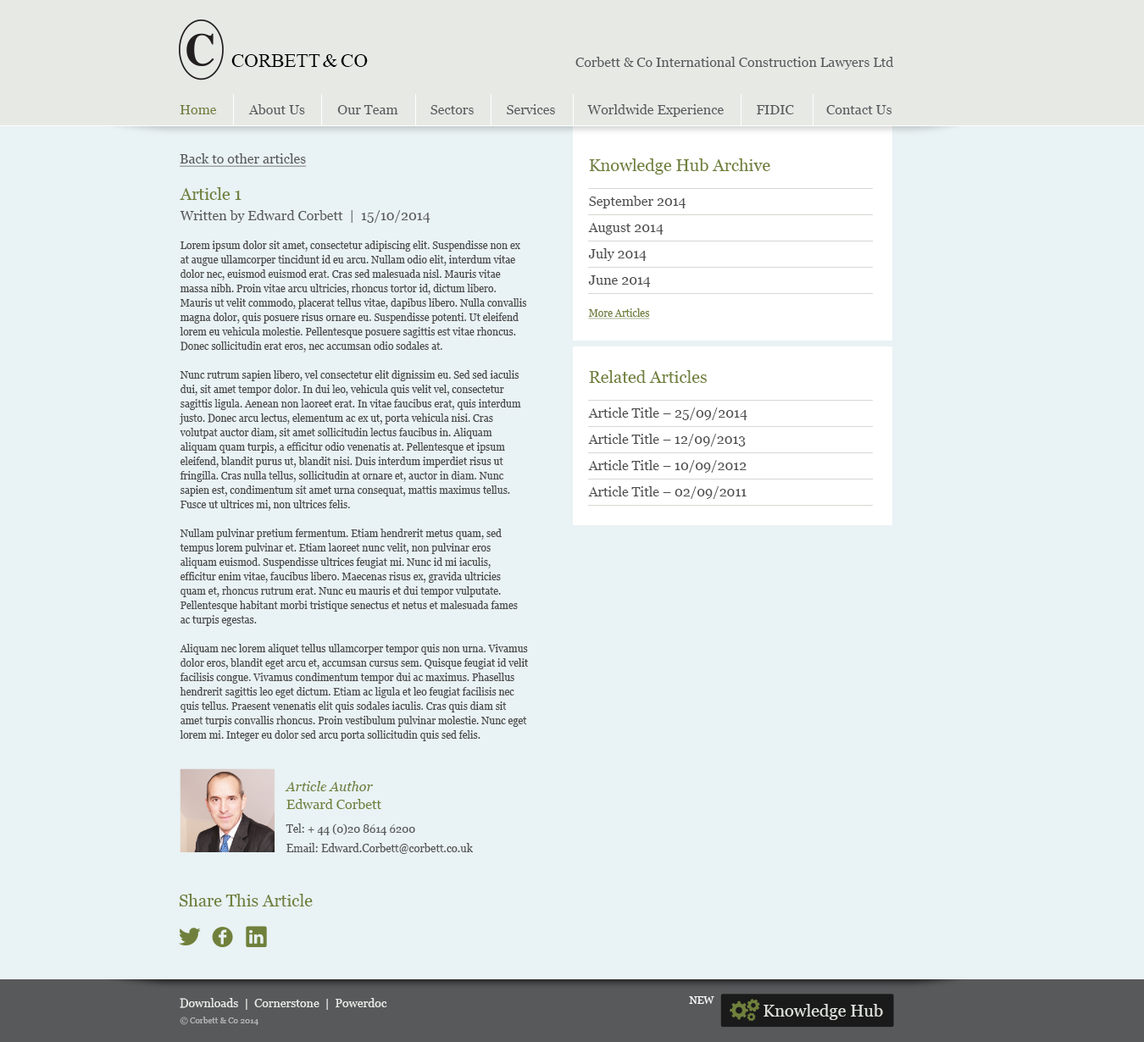
<style>
.page{position:relative;width:1144px;height:1042px;background:#e9f2f4}
.page>*{position:absolute;margin:0}
.t1{font:19.5px "TimesNewRomanPSMT";color:#000000}
.t2{font:13.6px "Georgia";color:#58595b}
.t3{font:13.6px "Georgia";color:#70803c}
.t4{font:13.6px "Georgia";color:#58595b;text-decoration:underline}
.t5{font:13.6px/26.3px "Georgia";color:#4d4d4d}
.t6{font:16.9px "Georgia";color:#70803c}
.t7{font:10.2px/14.4px "Georgia";color:#70803c;text-decoration:underline}
.t8{font:10.2px/14.4px "Georgia";color:#4d4d4d}
.t9{font:13.6px "Georgia-Italic";color:#70803c}
.t10{font:11px/19.5px "Georgia";color:#58595b}
.t11{font:11.9px "Georgia";color:#e7e9e5}
.t12{font:10.2px "Georgia";color:#ffffff}
.t13{font:16.9px "Georgia";color:#dde0db}
.t14{font:8.5px "Georgia";color:#b3b3b3}
</style>
<div class="page">
<p class="t1" style="left:231px;top:54px;width:137px;height:13px">CORBETT &amp; CO</p>
<p class="t2" style="left:575px;top:57px;width:319px;height:12px">Corbett &amp; Co International Construction Lawyers Ltd</p>
<p class="t3" style="left:180px;top:105px;width:37px;height:9px">Home</p>
<p class="t2" style="left:248px;top:104px;width:57px;height:10px">About Us</p>
<p class="t2" style="left:337px;top:105px;width:61px;height:9px">Our Team</p>
<p class="t2" style="left:430px;top:105px;width:44px;height:9px">Sectors</p>
<p class="t2" style="left:507px;top:104px;width:48px;height:10px">Services</p>
<p class="t2" style="left:587px;top:104px;width:137px;height:13px">Worldwide Experience</p>
<p class="t2" style="left:757px;top:105px;width:37px;height:9px">FIDIC</p>
<p class="t2" style="left:826px;top:105px;width:66px;height:9px">Contact Us</p>
<p class="t4" style="left:180px;top:153px;width:127px;height:14px">Back to other articles</p>
<p class="t5" style="left:588px;top:158px;width:182px;height:161px"><span class="t6">Knowledge Hub Archive<br></span>September 2014<br>August 2014<br>July 2014<br>June 2014<br><br><span class="t7">More Articles</span></p>
<p class="t8" style="left:179px;top:187px;width:350px;height:554px"><span class="t6">Article 1<br></span><span class="t2">Written by Edward Corbett  |  15/10/2014<br></span><br>Lorem ipsum dolor sit amet, consectetur adipiscing elit. Suspendisse non ex at augue ullamcorper tincidunt id eu arcu. Nullam odio elit, interdum vitae dolor nec, euismod euismod erat. Cras sed malesuada nisl. Mauris vitae massa nibh. Proin vitae arcu ultricies, rhoncus tortor id, dictum libero. Mauris ut velit commodo, placerat tellus vitae, dapibus libero. Nulla convallis magna dolor, quis posuere risus ornare eu. Suspendisse potenti. Ut eleifend lorem eu vehicula molestie. Pellentesque posuere sagittis est vitae rhoncus. Donec sollicitudin erat eros, nec accumsan odio sodales at.<br><br>Nunc rutrum sapien libero, vel consectetur elit dignissim eu. Sed sed iaculis dui, sit amet tempor dolor. In dui leo, vehicula quis velit vel, consectetur sagittis ligula. Aenean non laoreet erat. In vitae faucibus erat, quis interdum justo. Donec arcu lectus, elementum ac ex ut, porta vehicula nisi. Cras volutpat auctor diam, sit amet sollicitudin lectus faucibus in. Aliquam aliquam quam turpis, a efficitur odio venenatis at. Pellentesque et ipsum eleifend, blandit purus ut, blandit nisi. Duis interdum imperdiet risus ut fringilla. Cras nulla tellus, sollicitudin at ornare et, auctor in diam. Nunc sapien est, condimentum sit amet urna consequat, mattis maximus tellus. Fusce ut ultrices mi, non ultrices felis.<br><br>Nullam pulvinar pretium fermentum. Etiam hendrerit metus quam, sed tempus lorem pulvinar et. Etiam laoreet nunc velit, non pulvinar eros aliquam euismod. Suspendisse ultrices feugiat mi. Nunc id mi iaculis, efficitur enim vitae, faucibus libero. Maecenas risus ex, gravida ultricies quam et, rhoncus rutrum erat. Nunc eu mauris et dui tempor vulputate. Pellentesque habitant morbi tristique senectus et netus et malesuada fames ac turpis egestas.<br><br>Aliquam nec lorem aliquet tellus ullamcorper tempor quis non urna. Vivamus dolor eros, blandit eget arcu et, accumsan cursus sem. Quisque feugiat id velit facilisis congue. Vivamus condimentum tempor dui ac maximus. Phasellus hendrerit sagittis leo eget dictum. Etiam ac ligula et leo feugiat facilisis nec quis tellus. Praesent venenatis elit quis sodales iaculis. Cras quis diam sit amet turpis convallis rhoncus. Proin vestibulum pulvinar molestie. Nunc eget lorem mi. Integer eu dolor sed arcu porta sollicitudin quis sed felis.</p>
<p class="t5" style="left:588px;top:370px;width:159px;height:129px"><span class="t6">Related Articles<br></span>Article Title – 25/09/2014<br>Article Title – 12/09/2013<br>Article Title – 10/09/2012<br>Article Title – 02/09/2011</p>
<p class="t9" style="left:285px;top:781px;width:88px;height:10px">Article Author</p>
<p class="t3" style="left:286px;top:799px;width:95px;height:10px">Edward Corbett</p>
<p class="t10" style="left:286px;top:824px;width:187px;height:30px">Tel: + 44 (0)20 8614 6200<br>Email: Edward.Corbett@corbett.co.uk</p>
<p class="t6" style="left:179px;top:894px;width:134px;height:13px">Share This Article</p>
<p class="t11" style="left:180px;top:998px;width:207px;height:12px">Downloads  |  Cornerstone  |  Powerdoc</p>
<p class="t12" style="left:689px;top:997px;width:25px;height:7px">NEW</p>
<p class="t13" style="left:764px;top:1004px;width:119px;height:16px">Knowledge Hub</p>
<p class="t14" style="left:180px;top:1017px;width:78px;height:8px">© Corbett &amp; Co 2014</p>
</div>
